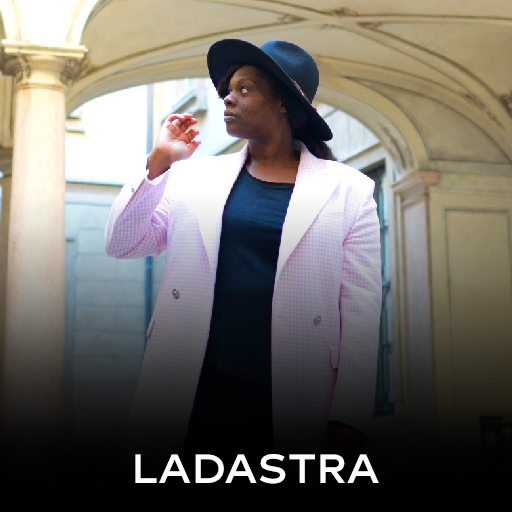
<style>
.page{position:relative;width:512px;height:512px}
.page>*{position:absolute;margin:0}
.t1{font:40.7px "TypoldExtended-Medium";color:#ffffff}
</style>
<div class="page">
<p class="t1" style="left:135px;top:454px;width:244px;height:30px">LADASTRA</p>
</div>
